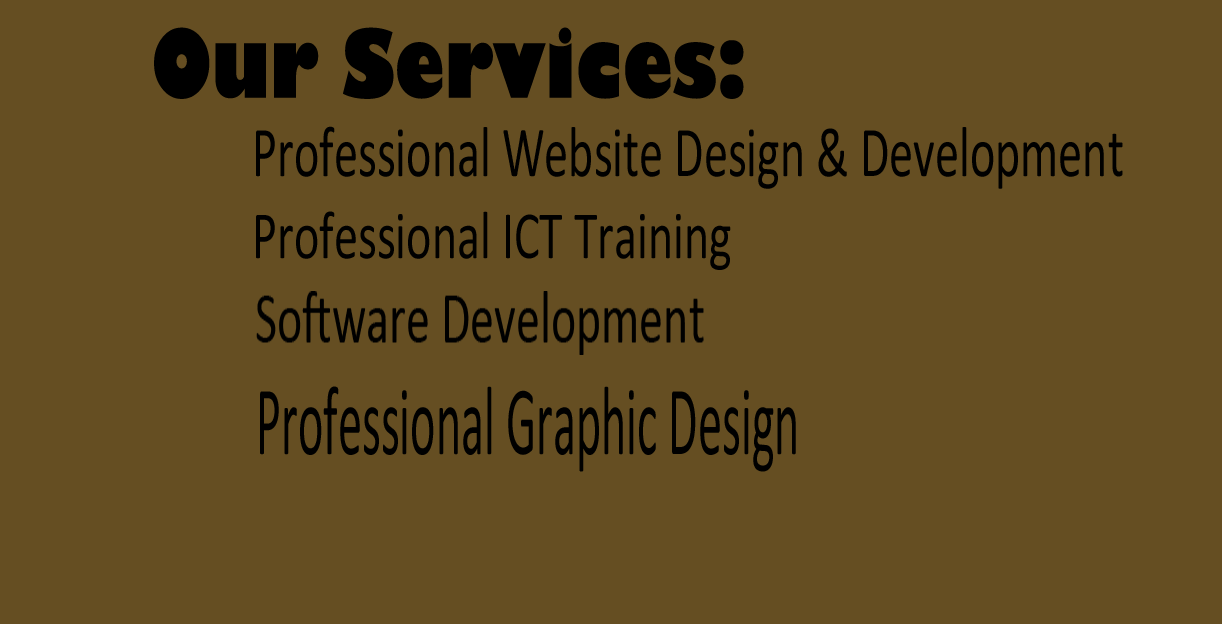
<style>
.page{position:relative;width:1222px;height:624px;background:#654e22}
.page>*{position:absolute;margin:0}
.t1{font:92.5px "GillSans-UltraBold";color:#000000;scale:0.78 1}
.t2{font:72px "Calibri";color:#000000;scale:0.67 1}
.t3{font:68px "Calibri";color:#000000;scale:0.71 1}
.t4{font:98.8px "Calibri";color:#000000;scale:0.49 1}
</style>
<div class="page">
<p class="t1" style="left:154px;top:27px;width:590px;height:72px">Our Services:</p>
<p class="t2" style="left:256px;top:126px;width:867px;height:63px">Professional Website Design &amp; Development</p>
<p class="t3" style="left:256px;top:211px;width:475px;height:59px">Professional ICT Training</p>
<p class="t4" style="left:260px;top:386px;width:536px;height:86px">Professional Graphic Design</p>
</div>
